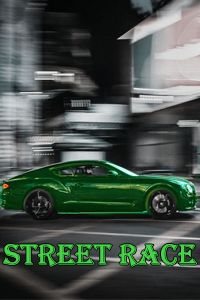
<style>
.page{position:relative;width:200px;height:300px}
.page>*{position:absolute;margin:0}
.t1{font:30px "Algerian";color:#46d449}
</style>
<div class="page">
<p class="t1" style="left:3px;top:244px;width:194px;height:23px">STREET RACE</p>
</div>
